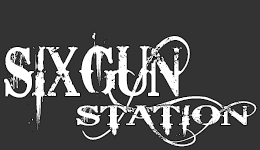
<style>
.page{position:relative;width:260px;height:150px;background:#333333}
.page>*{position:absolute;margin:0}
.t1{font:68.3px "BleedingCowboys";color:#ffffff;scale:0.75 1}
.t2{font:27.1px "BleedingCowboys";color:#ffffff;scale:1.6 1}
</style>
<div class="page">
<p class="t1" style="left:4px;top:32px;width:225px;height:108px">SIXGUN</p>
<p class="t2" style="left:76px;top:101px;width:181px;height:46px">STATION</p>
</div>
